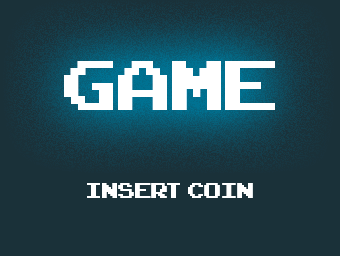
<style>
.page{position:relative;width:340px;height:256px;background:#1a3139}
.page>*{position:absolute;margin:0}
.t1{font:98px "ArcadeClassic";color:#ffffff}
.t2{font:30px "ArcadeClassic";color:#ffffff}
</style>
<div class="page">
<p class="t1" style="left:64px;top:61px;width:211px;height:49px">GAME</p>
<p class="t2" style="left:87px;top:183px;width:166px;height:15px">INSERT COIN</p>
</div>
